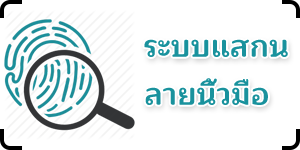
<style>
.page{position:relative;width:300px;height:150px;background:#ffffff}
.page>*{position:absolute;margin:0}
.t1{font:30px/48px "Maitree-Bold";color:#19929d}
</style>
<div class="page">
<p class="t1" style="left:144px;top:39px;width:144px;height:66px">ระบบแสกน<br>ลายนิ้วมือ</p>
</div>
